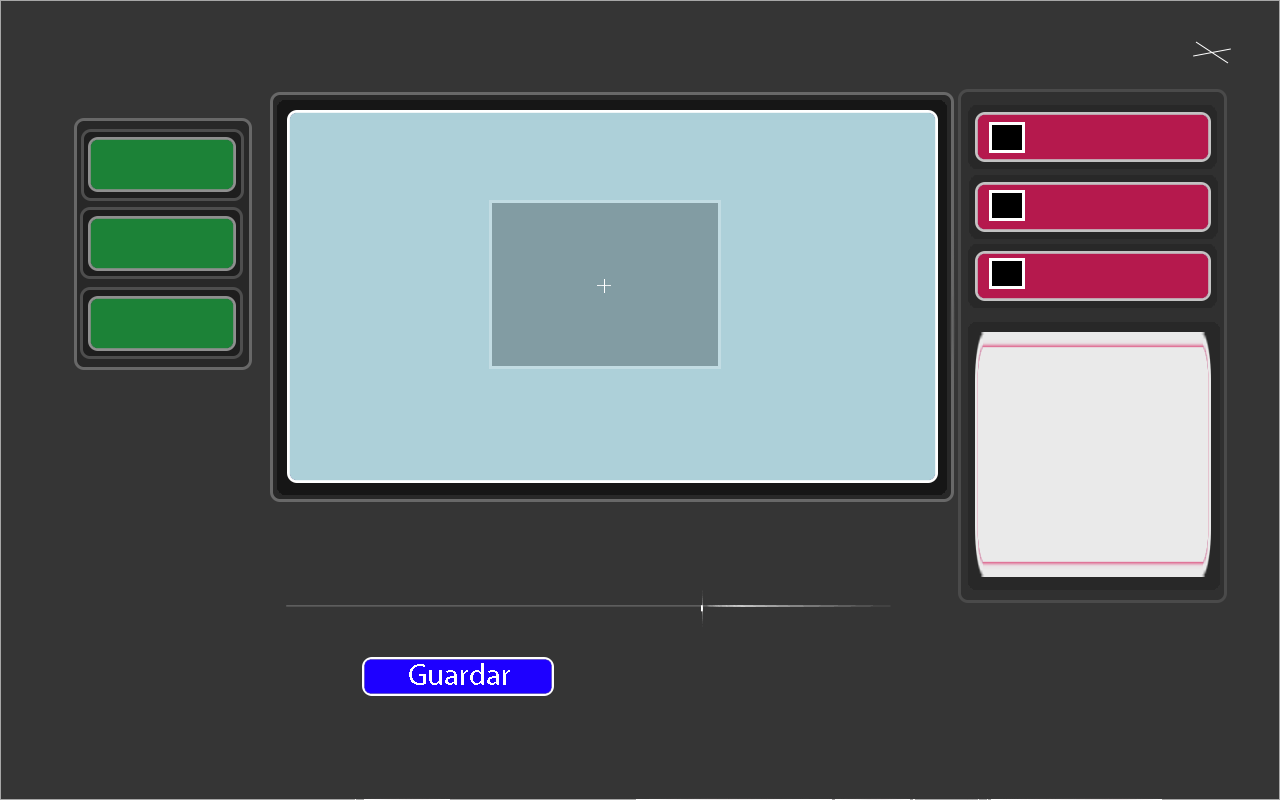
<style>
.page{position:relative;width:1280px;height:800px;background:#353535}
.page>*{position:absolute;margin:0}
.t1{font:30px "MyriadPro-Regular";color:#ffffff}
</style>
<div class="page">
<p class="t1" style="left:409px;top:663px;width:101px;height:22px">Guardar</p>
</div>
